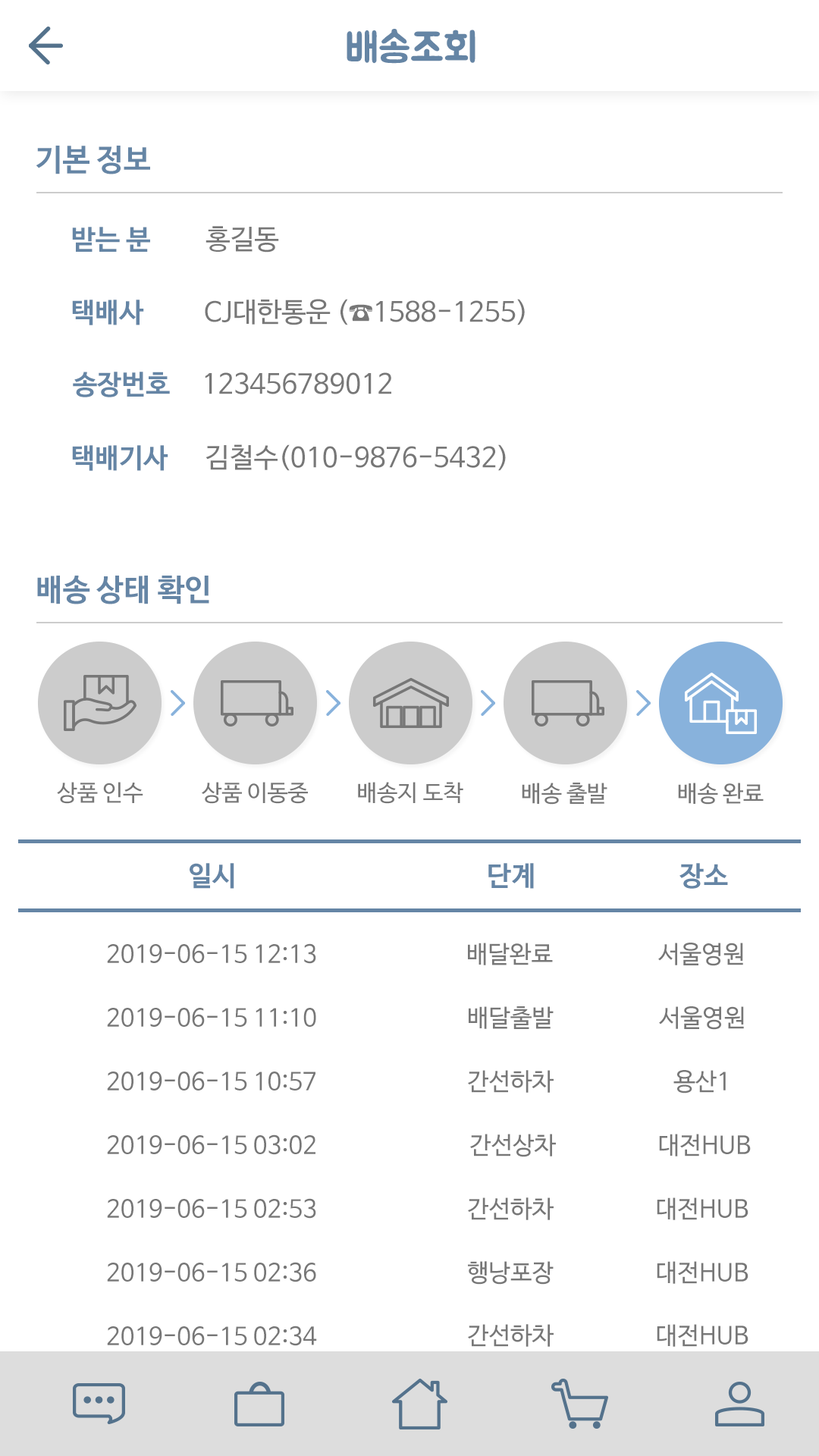
<style>
.page{position:relative;width:819px;height:1456px;background:#ffffff}
.page>*{position:absolute;margin:0}
.t1{font:40.9px "BMJUA";color:#6585a5}
.t2{font:30.3px "NanumBarunGothicBold";color:#6585a5}
.t3{font:27.3px "NanumBarunGothicBold";color:#6585a5}
.t4{font:27.3px "NanumBarunGothic";color:#777777}
.t5{font:22.7px "NanumBarunGothic";color:#777777}
.t6{font:24.3px "NanumBarunGothic";color:#777777}
</style>
<div class="page">
<p class="t1" style="left:347px;top:29px;width:128px;height:35px">배송조회</p>
<p class="t2" style="left:36px;top:146px;width:114px;height:28px">기본 정보</p>
<p class="t3" style="left:72px;top:227px;width:78px;height:25px">받는 분</p>
<p class="t4" style="left:206px;top:226px;width:73px;height:27px">홍길동</p>
<p class="t3" style="left:72px;top:300px;width:72px;height:25px">택배사</p>
<p class="t4" style="left:205px;top:299px;width:320px;height:26px">CJ대한통운 (☎1588-1255)</p>
<p class="t3" style="left:73px;top:372px;width:97px;height:25px">송장번호</p>
<p class="t4" style="left:205px;top:372px;width:186px;height:22px">123456789012</p>
<p class="t3" style="left:72px;top:445px;width:96px;height:26px">택배기사</p>
<p class="t4" style="left:206px;top:444px;width:300px;height:27px">김철수(010-9876-5432)</p>
<p class="t2" style="left:37px;top:576px;width:172px;height:28px">배송 상태 확인</p>
<p class="t5" style="left:57px;top:782px;width:86px;height:22px">상품 인수</p>
<p class="t5" style="left:202px;top:782px;width:106px;height:22px">상품 이동중</p>
<p class="t5" style="left:358px;top:782px;width:105px;height:22px">배송지 도착</p>
<p class="t5" style="left:522px;top:783px;width:85px;height:22px">배송 출발</p>
<p class="t5" style="left:678px;top:783px;width:86px;height:22px">배송 완료</p>
<p class="t3" style="left:190px;top:863px;width:44px;height:26px">일시</p>
<p class="t3" style="left:488px;top:863px;width:46px;height:26px">단계</p>
<p class="t3" style="left:679px;top:863px;width:49px;height:26px">장소</p>
<p class="t6" style="left:107px;top:943px;width:209px;height:21px">2019-06-15 12:13</p>
<p class="t6" style="left:468px;top:943px;width:85px;height:22px">배달완료</p>
<p class="t6" style="left:658px;top:943px;width:85px;height:23px">서울영원</p>
<p class="t6" style="left:107px;top:1008px;width:209px;height:19px">2019-06-15 11:10</p>
<p class="t6" style="left:469px;top:1006px;width:85px;height:23px">배달출발</p>
<p class="t6" style="left:659px;top:1006px;width:85px;height:24px">서울영원</p>
<p class="t6" style="left:107px;top:1072px;width:208px;height:18px">2019-06-15 10:57</p>
<p class="t6" style="left:468px;top:1070px;width:86px;height:23px">간선하차</p>
<p class="t6" style="left:673px;top:1070px;width:53px;height:24px">용산1</p>
<p class="t6" style="left:470px;top:1134px;width:86px;height:23px">간선상차</p>
<p class="t6" style="left:659px;top:1134px;width:92px;height:22px">대전HUB</p>
<p class="t6" style="left:107px;top:1134px;width:208px;height:21px">2019-06-15 03:02</p>
<p class="t6" style="left:107px;top:1198px;width:209px;height:21px">2019-06-15 02:53</p>
<p class="t6" style="left:468px;top:1197px;width:86px;height:23px">간선하차</p>
<p class="t6" style="left:657px;top:1197px;width:91px;height:23px">대전HUB</p>
<p class="t6" style="left:107px;top:1262px;width:209px;height:20px">2019-06-15 02:36</p>
<p class="t6" style="left:468px;top:1261px;width:86px;height:24px">행낭포장</p>
<p class="t6" style="left:657px;top:1261px;width:91px;height:23px">대전HUB</p>
<p class="t6" style="left:107px;top:1326px;width:210px;height:20px">2019-06-15 02:34</p>
<p class="t6" style="left:468px;top:1324px;width:86px;height:23px">간선하차</p>
<p class="t6" style="left:657px;top:1324px;width:91px;height:23px">대전HUB</p>
</div>
